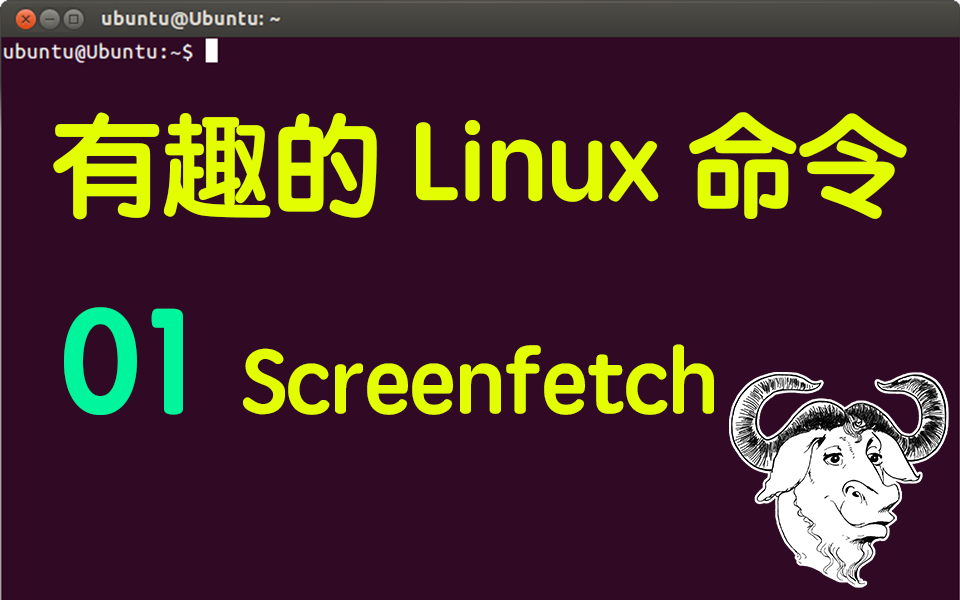
<style>
.page{position:relative;width:960px;height:600px;background:#300a24}
.page>*{position:absolute;margin:0}
.t1{font:110px "STYuanti-SC-Bold";color:#e3fe00}
.t2{font:90px "STYuanti-SC-Bold";color:#e3fe00}
.t3{font:150px "STYuanti-SC-Bold";color:#00f59c}
</style>
<div class="page">
<p class="t1" style="left:53px;top:112px;width:854px;height:108px">有趣的 Linux 命令</p>
<p class="t2" style="left:64px;top:307px;width:650px;height:108px"><span class="t3">01  </span>Screenfetch</p>
</div>
